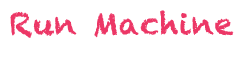
<style>
.page{position:relative;width:241px;height:57px;background:#ffffff}
.page>*{position:absolute;margin:0}
.t1{font:30px "Chalkduster";letter-spacing:0.025em;color:#ec3766}
</style>
<div class="page">
<p class="t1" style="left:10px;top:10px;width:224px;height:28px">Run Machine</p>
</div>
